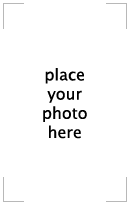
<style>
.page{position:relative;width:130px;height:206px;background:#ffffff}
.page>*{position:absolute;margin:0}
.t1{font:12px "LucidaSansUnicode";color:#000000}
</style>
<div class="page">
<p class="t1" style="left:43px;top:68px;width:44px;height:71px;text-align:center">place<br>your<br>photo<br>here</p>
</div>
